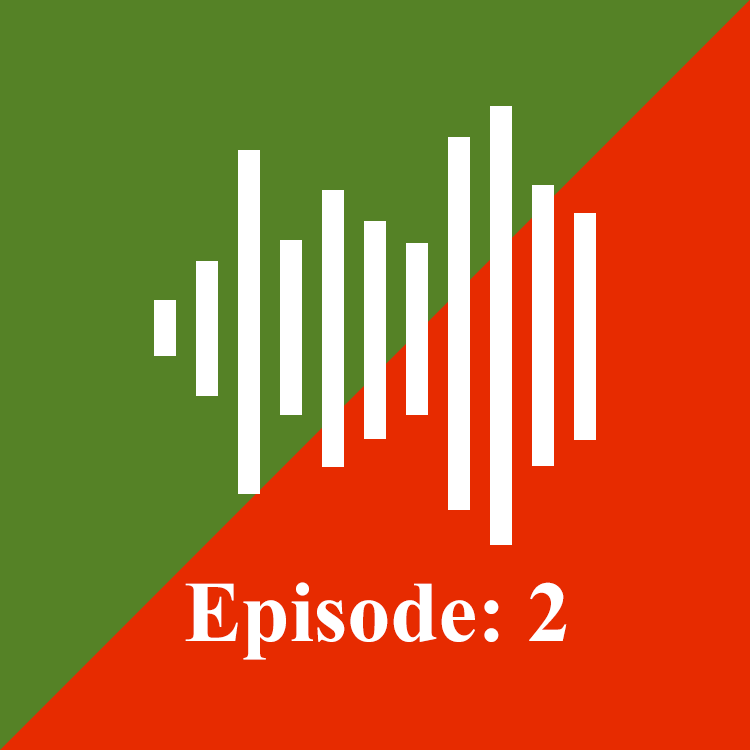
<style>
.page{position:relative;width:750px;height:750px;background:#558226}
.page>*{position:absolute;margin:0}
.t1{font:86.4px "TimesNewRomanPS-BoldMT";color:#ffffff}
</style>
<div class="page">
<p class="t1" style="left:185px;top:582px;width:382px;height:78px">Episode: 2</p>
</div>
